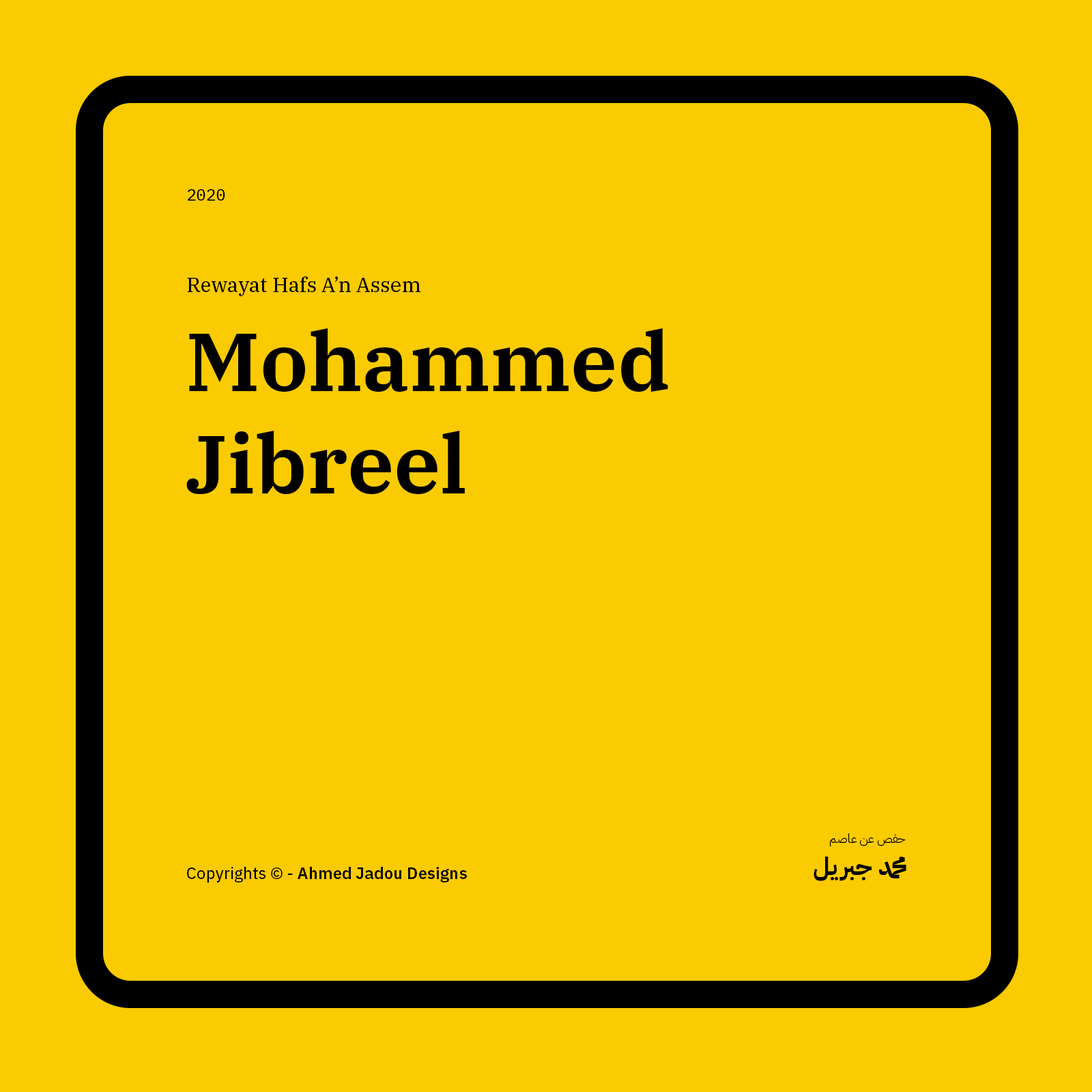
<style>
.page{position:relative;width:1092px;height:1092px;background:#facb00}
.page>*{position:absolute;margin:0}
.t1{font:16.4px "IBMPlexMono-Text";color:#000000}
.t2{font:20.5px "IBMPlexSerif-Text";color:#000000}
.t3{font:81.9px/102.7px "IBMPlexSerif-SemiBold";color:#000000}
.t4{font:12.3px "IBMPlexArabic-Light";color:#000000}
.t5{font:24.6px "IBMPlexArabic-Bold";color:#000000}
.t6{font:16.4px "IBMPlexSans-SemiBold";color:#000000}
.t7{font:16.4px "IBMPlexSans-Text";color:#000000}
</style>
<div class="page">
<p class="t1" style="left:188px;top:189px;width:37px;height:12px">2020</p>
<p class="t2" style="left:187px;top:276px;width:233px;height:20px">Rewayat Hafs A’n Assem</p>
<p class="t3" style="left:186px;top:328px;width:482px;height:166px">Mohammed Jibreel</p>
<p class="t4" style="left:830px;top:833px;width:76px;height:14px">حفص عن عاصم</p>
<p class="t5" style="left:814px;top:857px;width:92px;height:24px">محمد جبريل</p>
<p class="t6" style="left:187px;top:867px;width:280px;height:15px"><span class="t7">Copyrights © - </span>Ahmed Jadou Designs</p>
</div>
